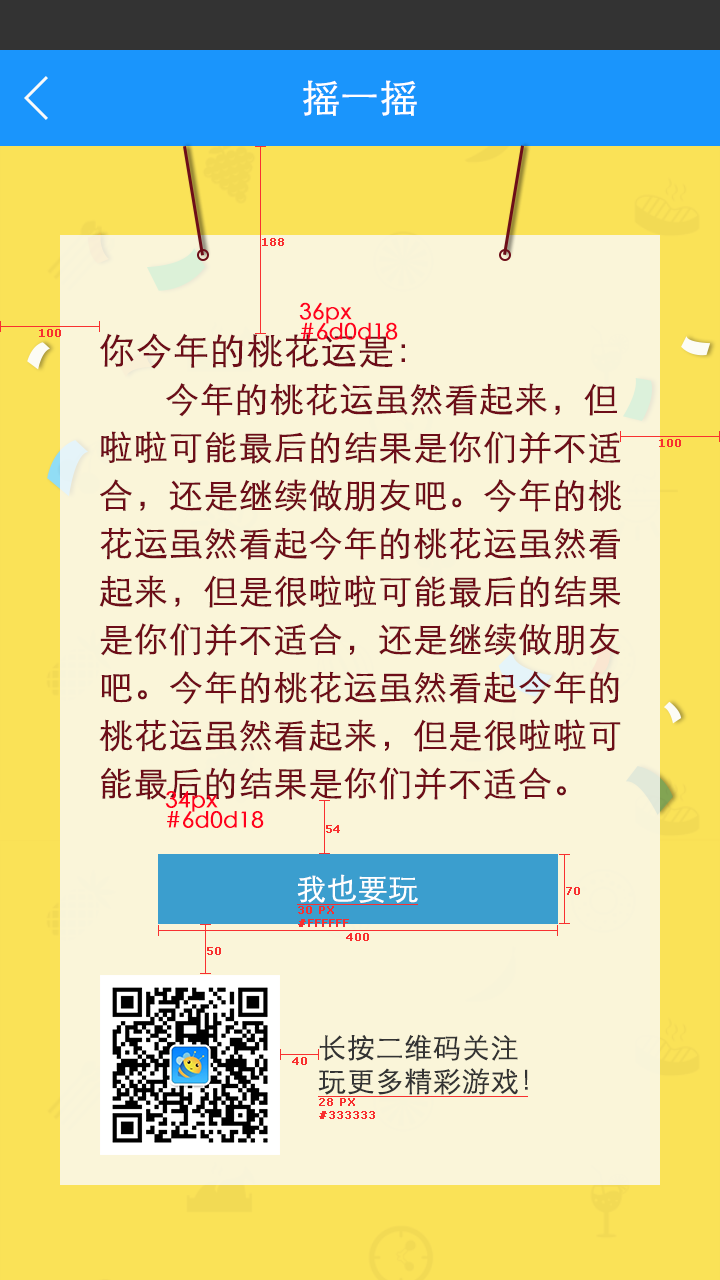
<style>
.page{position:relative;width:720px;height:1280px;background:#faf5d9}
.page>*{position:absolute;margin:0}
.t1{font:38px "STXihei";color:#ffffff;font-weight:bold}
.t2{font:11px "Verdana";color:#f83030;font-weight:bold}
.t3{font:22px/20px "STXihei";color:#ff021f;font-weight:bold}
.t4{font:34px/48px "STXihei";color:#6d0d18;font-weight:bold}
.t5{font:36px/48px "STXihei";color:#6d0d18;font-weight:bold}
.t6{font:22px/20px "STXihei";color:#ff001d;font-weight:bold}
.t7{font:30px "STXihei";color:#ffffff;font-weight:bold}
.t8{font:28px "STXihei";color:#333333;font-weight:bold}
</style>
<div class="page">
<p class="t1" style="left:303px;top:80px;width:114px;height:36px">摇一摇</p>
<p class="t2" style="left:262px;top:238px;width:22px;height:8px">188</p>
<p class="t3" style="left:299px;top:302px;width:99px;height:38px">36px<br>#6d0d18</p>
<p class="t2" style="left:39px;top:329px;width:22px;height:8px">100</p>
<p class="t4" style="left:99px;top:333px;width:523px;height:467px"><span class="t5">你今年的桃花运是</span>：<br>       今年的桃花运虽然看起来，但<br>啦啦可能最后的结果是你们并不适<br>合，还是继续做朋友吧。今年的桃<br>花运虽然看起今年的桃花运虽然看<br>起来，但是很啦啦可能最后的结果<br>是你们并不适合，还是继续做朋友<br>吧。今年的桃花运虽然看起今年的<br>桃花运虽然看起来，但是很啦啦可<br>能最后的结果是你们并不适合。</p>
<p class="t2" style="left:659px;top:439px;width:22px;height:8px">100</p>
<p class="t6" style="left:165px;top:791px;width:99px;height:37px">34px<br>#6d0d18</p>
<p class="t2" style="left:326px;top:825px;width:14px;height:8px">54</p>
<p class="t7" style="left:297px;top:874px;width:121px;height:29px">我也要玩</p>
<p class="t2" style="left:566px;top:887px;width:14px;height:8px">70</p>
<p class="t2" style="left:298px;top:906px;width:51px;height:21px">30 PX<br>#FFFFFF</p>
<p class="t2" style="left:346px;top:933px;width:23px;height:8px">400</p>
<p class="t2" style="left:207px;top:947px;width:14px;height:8px">50</p>
<p class="t8" style="left:318px;top:1034px;width:210px;height:61px">长按二维码关注<br>玩更多精彩游戏！</p>
<p class="t2" style="left:292px;top:1057px;width:15px;height:8px">40</p>
<p class="t2" style="left:319px;top:1098px;width:56px;height:21px">28 PX<br>#333333</p>
</div>
